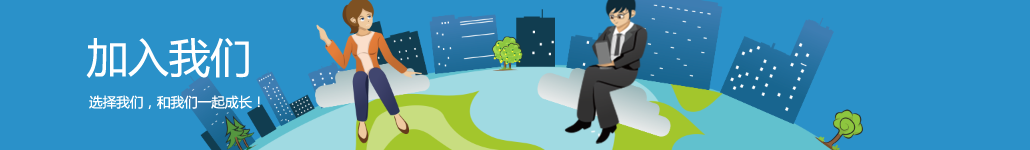
<style>
.page{position:relative;width:1030px;height:150px;background:#2a91c9}
.page>*{position:absolute;margin:0}
.t1{font:41.2px "MicrosoftYaHei";color:#ffffff}
.t2{font:13.6px "MicrosoftYaHei";color:#ffffff}
</style>
<div class="page">
<p class="t1" style="left:86px;top:38px;width:163px;height:40px">加入我们</p>
<p class="t2" style="left:89px;top:95px;width:171px;height:14px">选择我们，和我们一起成长！</p>
</div>
